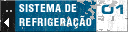
<style>
.page{position:relative;width:128px;height:32px}
.page>*{position:absolute;margin:0}
.t1{font:10.8px/14px "HelveticaLT-Condensed-Black";letter-spacing:0.04em;color:#ffffff}
</style>
<div class="page">
<p class="t1" style="left:19px;top:4px;width:73px;height:25px">SISTEMA DE<br>REFRIGERAÇÃO</p>
</div>
